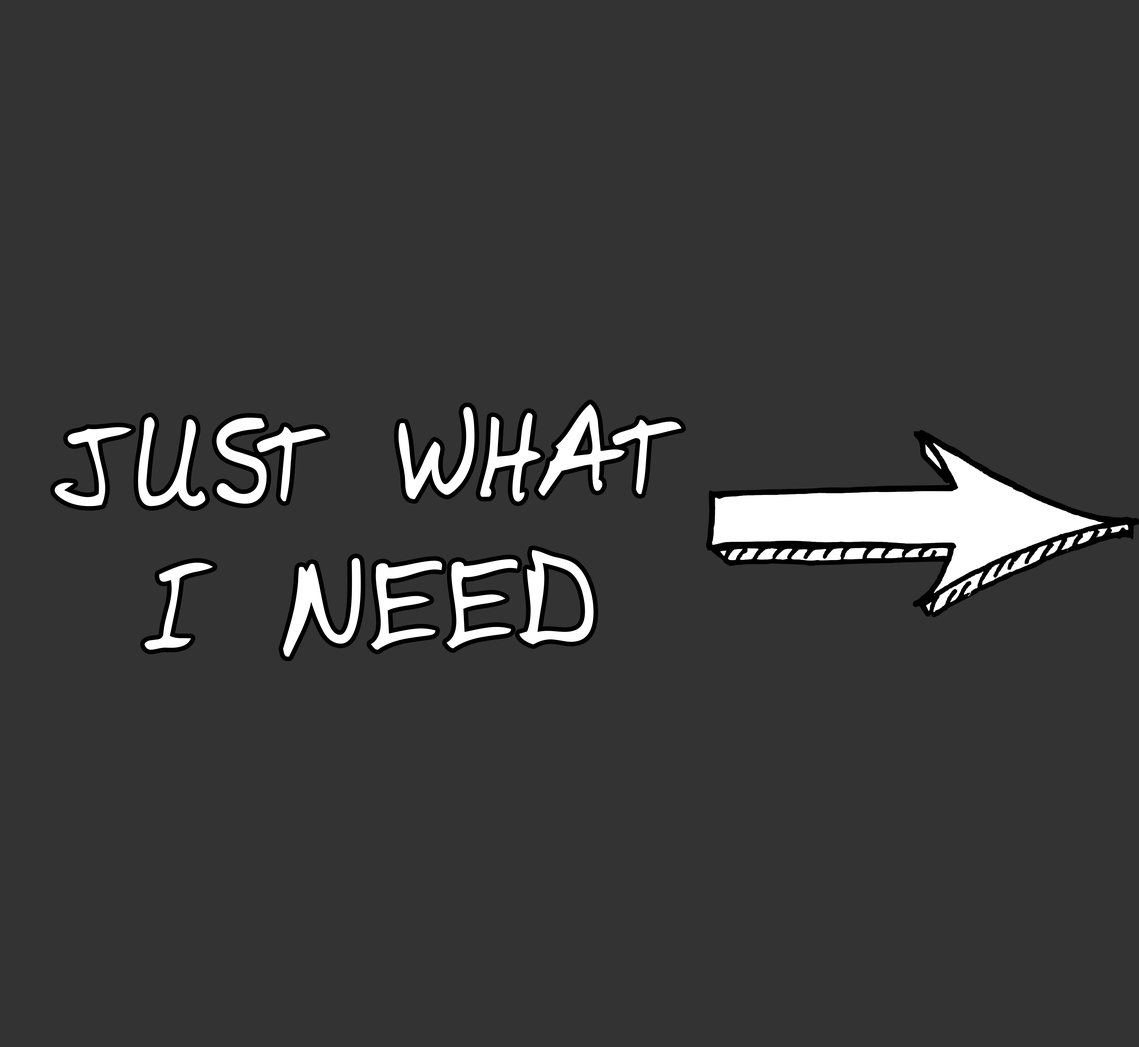
<style>
.page{position:relative;width:1139px;height:1047px;background:#333333}
.page>*{position:absolute;margin:0}
.t1{font:121px "DomesticManners";letter-spacing:0.04em;color:#ffffff}
</style>
<div class="page">
<p class="t1" style="left:55px;top:404px;width:626px;height:253px;text-align:center;rotate:-1deg">JUST WHAT<br>I NEED</p>
</div>
